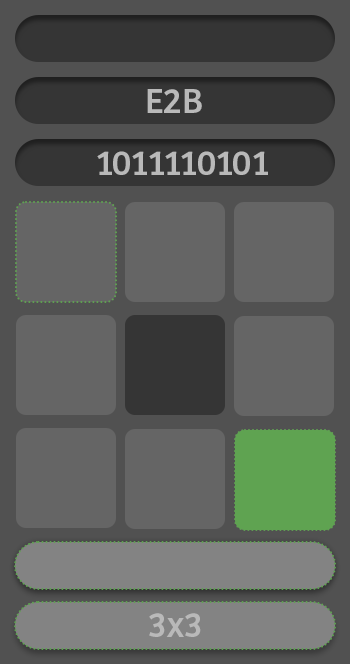
<style>
.page{position:relative;width:350px;height:664px;background:#656565}
.page>*{position:absolute;margin:0}
.t1{font:36px "Bree-Regular";color:#bababa}
</style>
<div class="page">
<p class="t1" style="left:147px;top:89px;width:55px;height:24px">E2B</p>
<p class="t1" style="left:97px;top:151px;width:171px;height:24px">1011110101</p>
<p class="t1" style="left:149px;top:613px;width:52px;height:24px">3x3</p>
</div>
